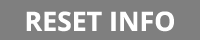
<style>
.page{position:relative;width:200px;height:40px;background:#7f7f7f}
.page>*{position:absolute;margin:0}
.t1{font:26.7px "OpenSans-Bold";color:#ffffff}
</style>
<div class="page">
<p class="t1" style="left:26px;top:11px;width:148px;height:21px">RESET INFO</p>
</div>
